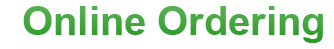
<style>
.page{position:relative;width:334px;height:49px;background:#ffffff}
.page>*{position:absolute;margin:0}
.t1{font:40px "Arial-BoldMT";color:#42a63e}
</style>
<div class="page">
<p class="t1" style="left:23px;top:6px;width:300px;height:37px">Online Ordering</p>
</div>
